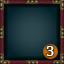
<style>
.page{position:relative;width:64px;height:64px}
.page>*{position:absolute;margin:0}
.t1{font:14px "Bitter-Regular";color:#ffffff}
</style>
<div class="page">
<p class="t1" style="left:46px;top:46px;width:8px;height:10px">3</p>
</div>
